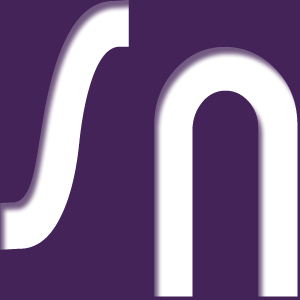
<style>
.page{position:relative;width:300px;height:300px;background:#442358}
.page>*{position:absolute;margin:0}
.t1{font:300px "Brandish";color:#ffffff;scale:0.86 1}
</style>
<div class="page">
<p class="t1" style="left:0px;top:0px;width:129px;height:250px">S</p>
<p class="t1" style="left:154px;top:47px;width:144px;height:250px">N</p>
</div>
